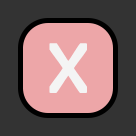
<style>
.page{position:relative;width:136px;height:136px;background:#333333}
.page>*{position:absolute;margin:0}
.t1{font:72px "BerlinSansFB-Reg";letter-spacing:-0.005em;color:#f4f4f4}
</style>
<div class="page">
<p class="t1" style="left:49px;top:43px;width:38px;height:50px">X</p>
</div>
